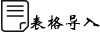
<style>
.page{position:relative;width:100px;height:32px;background:#ffffff}
.page>*{position:absolute;margin:0}
.t1{font:18px "STXinwei";color:#020202}
</style>
<div class="page">
<p class="t1" style="left:30px;top:14px;width:70px;height:17px">表格导入</p>
</div>
